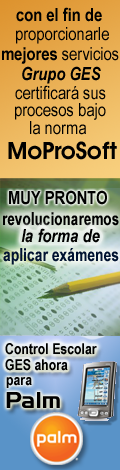
<style>
.page{position:relative;width:120px;height:470px}
.page>*{position:absolute;margin:0}
.t1{font:18px "ArialNarrow-Bold";color:#000000}
.t2{font:18px "ArialNarrow";color:#000000}
.t3{font:18px "ArialNarrow-BoldItalic";color:#000000}
.t4{font:24px "AvantGardeITCbyBT-Demi";color:#000000}
.t5{font:18px "ArialNarrow-Bold";color:#000000;scale:0.92 1}
.t6{font:18px "ArialNarrow-Bold";color:#011331;scale:0.94 1}
.t7{font:15px "ArialNarrow-Bold";color:#000000}
.t8{font:24px "HandelGotD-Bold";color:#000000}
</style>
<div class="page">
<p class="t1" style="left:16px;top:7px;width:86px;height:15px">con el fin de</p>
<p class="t2" style="left:16px;top:27px;width:93px;height:17px">proporcionarle</p>
<p class="t2" style="left:2px;top:47px;width:117px;height:17px"><span class="t1">mejores</span> servicios</p>
<p class="t3" style="left:22px;top:66px;width:79px;height:18px">Grupo GES</p>
<p class="t2" style="left:15px;top:85px;width:91px;height:15px">certificará sus</p>
<p class="t2" style="left:15px;top:103px;width:91px;height:17px">procesos bajo</p>
<p class="t2" style="left:30px;top:121px;width:56px;height:14px">la norma</p>
<p class="t4" style="left:8px;top:141px;width:109px;height:19px">MoProSoft</p>
<p class="t1" style="left:9px;top:190px;width:98px;height:15px">MUY PRONTO</p>
<p class="t5" style="left:3px;top:212px;width:116px;height:14px">revolucionaremos</p>
<p class="t3" style="left:21px;top:228px;width:79px;height:15px">la forma de</p>
<p class="t6" style="left:3px;top:248px;width:116px;height:17px">aplicar exámenes</p>
<p class="t7" style="left:5px;top:343px;width:92px;height:12px">Control Escolar</p>
<p class="t7" style="left:5px;top:359px;width:63px;height:12px">GES ahora</p>
<p class="t7" style="left:6px;top:377px;width:26px;height:11px">para</p>
<p class="t8" style="left:6px;top:392px;width:54px;height:16px">Palm</p>
</div>
